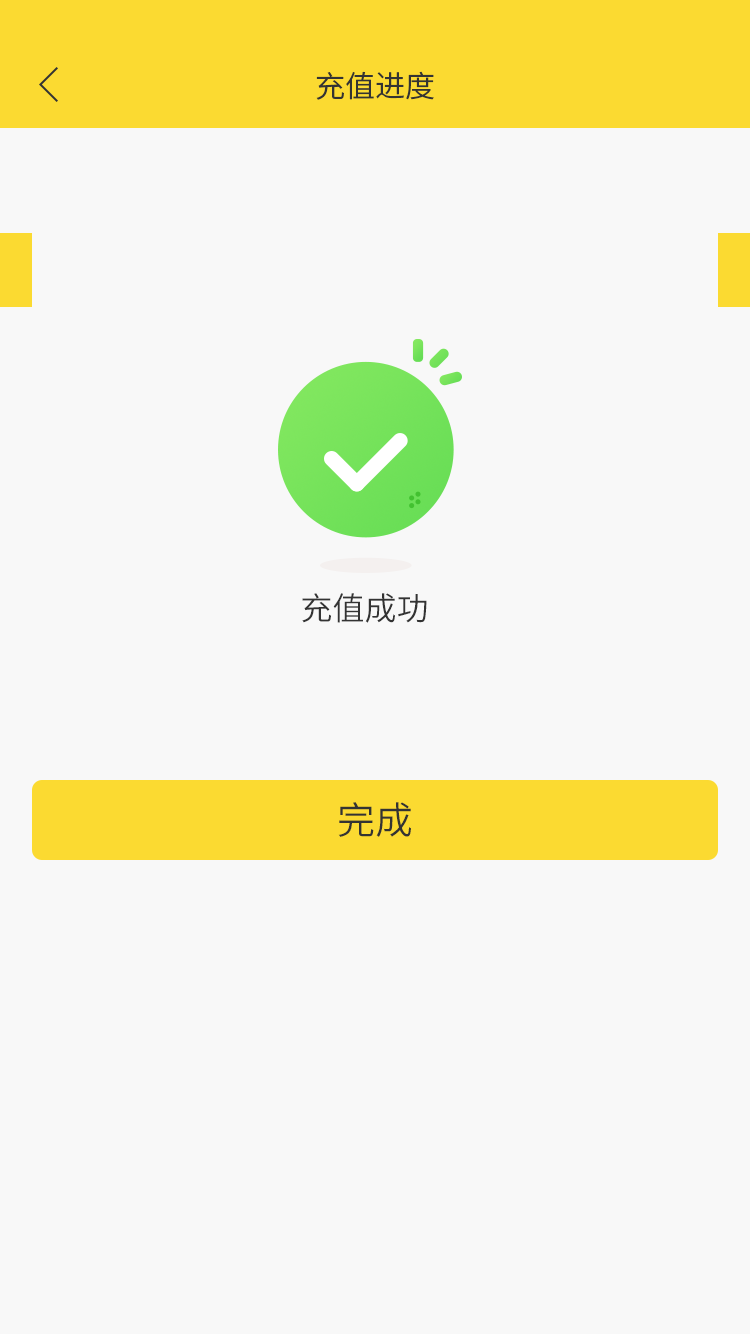
<style>
.page{position:relative;width:750px;height:1334px;background:#f8f8f8}
.page>*{position:absolute;margin:0}
.t1{font:30px "SourceHanSansSC-Normal";color:#333333}
.t2{font:32px "SourceHanSansSC-Normal";color:#333333}
.t3{font:38px "SourceHanSansSC-Normal";color:#333333}
</style>
<div class="page">
<p class="t1" style="left:316px;top:71px;width:118px;height:29px">充值进度</p>
<p class="t2" style="left:302px;top:593px;width:125px;height:30px">充值成功</p>
<p class="t3" style="left:338px;top:802px;width:73px;height:35px">完成</p>
</div>
